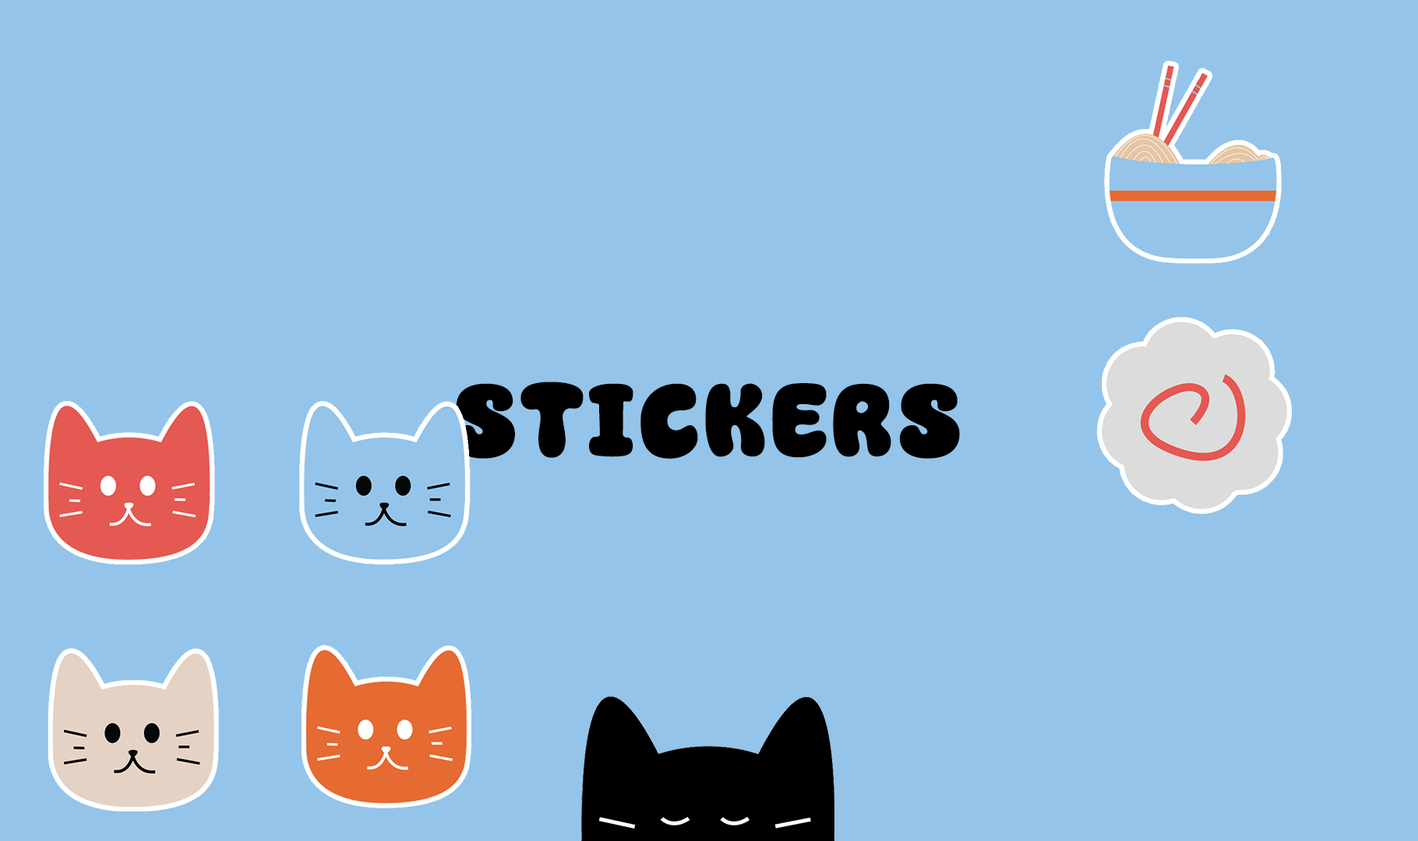
<style>
.page{position:relative;width:1418px;height:841px;background:#94c4e9}
.page>*{position:absolute;margin:0}
.t1{font:104.3px "SuperKinds";letter-spacing:0.065em;color:#000000;scale:0.97 1}
</style>
<div class="page">
<p class="t1" style="left:455px;top:382px;width:505px;height:77px">STICKERS</p>
</div>
